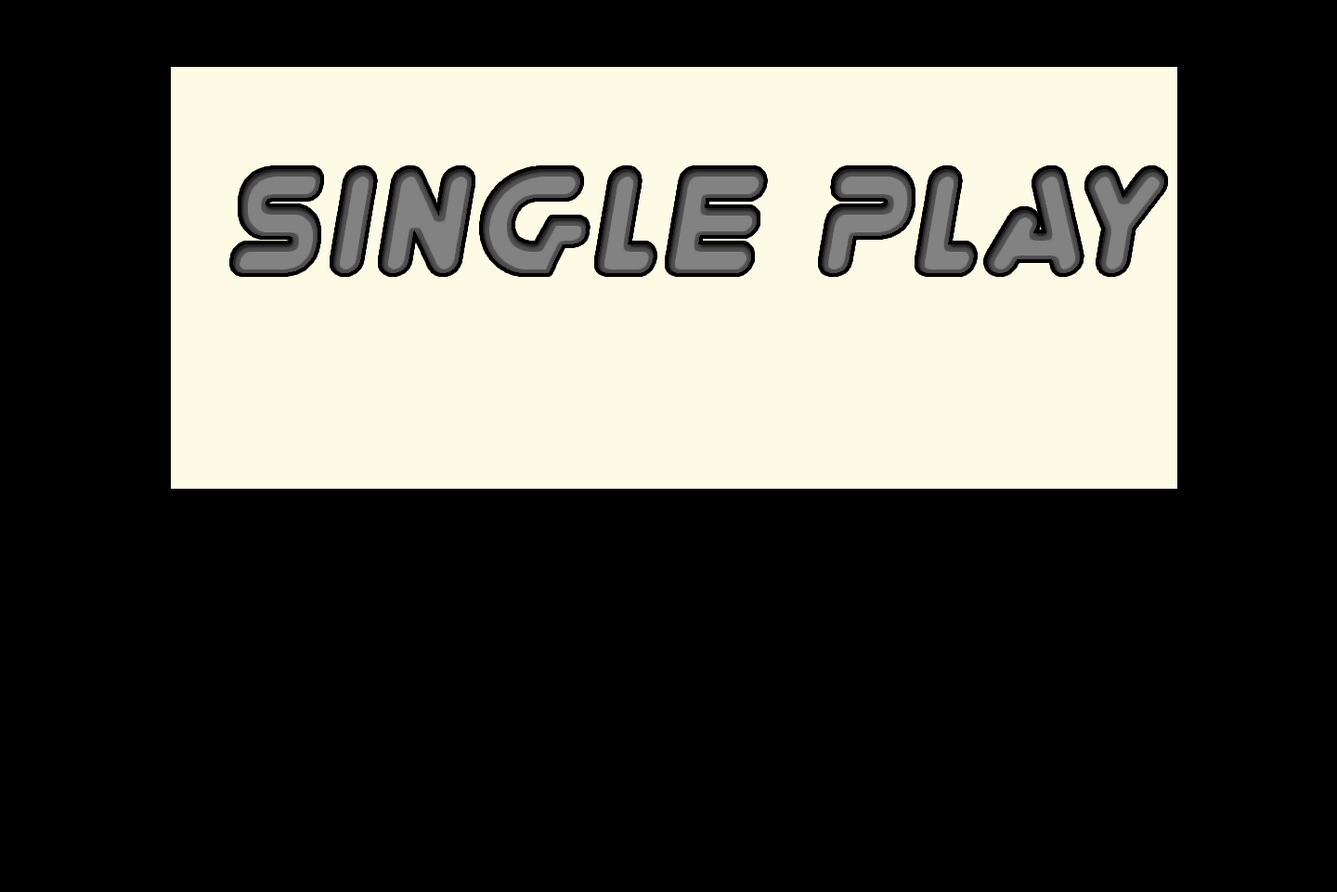
<style>
.page{position:relative;width:1337px;height:892px;background:#000000}
.page>*{position:absolute;margin:0}
.t1{font:139.3px "YoureGone-Italic";letter-spacing:0.06em}
</style>
<div class="page">
<p class="t1" style="left:233px;top:169px;width:932px;height:104px">SINGLE PLAY</p>
</div>
